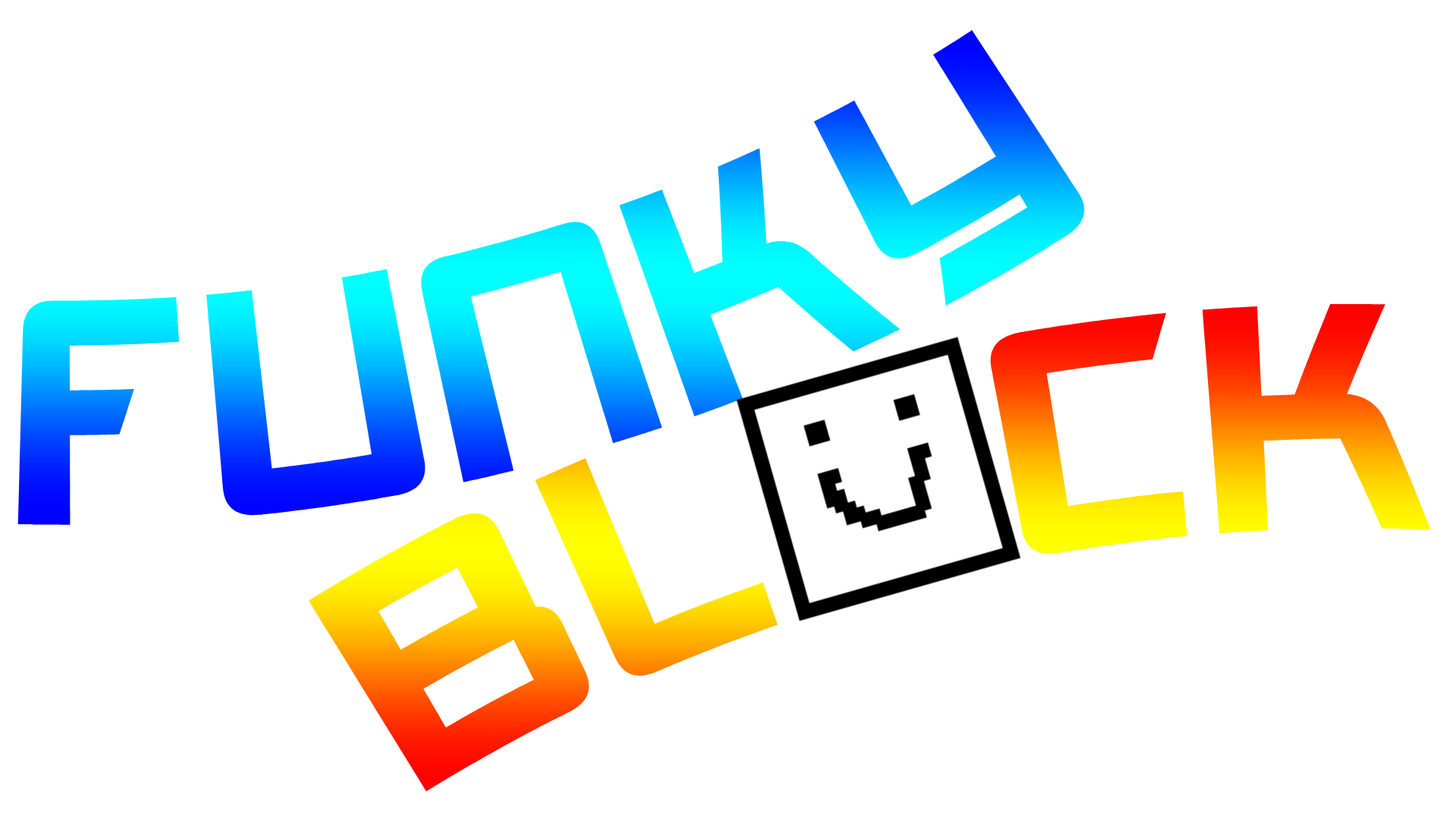
<style>
.page{position:relative;width:1456px;height:819px;background:#ffffff}
.page>*{position:absolute;margin:0}
.t1{font:305.9px "Akashi"}
</style>
<div class="page">
<p class="t1" style="left:17px;top:30px;width:1069px;height:495px;rotate:-17deg">FUNKY</p>
<p class="t1" style="left:308px;top:303px;width:1123px;height:489px;rotate:-14deg">BLOCK</p>
</div>
